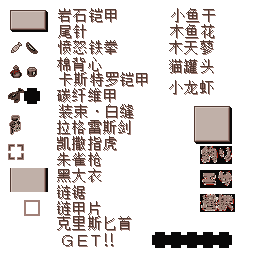
<style>
.page{position:relative;width:256px;height:256px;background:#ffffff}
.page>*{position:absolute;margin:0}
.t1{font:15px "SimSun";letter-spacing:0.02em;color:#503830}
</style>
<div class="page">
<p class="t1" style="left:58px;top:8px;width:58px;height:14px">岩石铠甲</p>
<p class="t1" style="left:171px;top:8px;width:44px;height:14px">小鱼干</p>
<p class="t1" style="left:58px;top:24px;width:28px;height:14px">尾针</p>
<p class="t1" style="left:170px;top:24px;width:44px;height:14px">木鱼花</p>
<p class="t1" style="left:58px;top:40px;width:59px;height:14px">愤怒铁拳</p>
<p class="t1" style="left:169px;top:40px;width:44px;height:14px">木天蓼</p>
<p class="t1" style="left:57px;top:57px;width:44px;height:14px">棉背心</p>
<p class="t1" style="left:169px;top:59px;width:44px;height:14px">猫罐头</p>
<p class="t1" style="left:59px;top:72px;width:88px;height:14px">卡斯特罗铠甲</p>
<p class="t1" style="left:57px;top:88px;width:58px;height:14px">碳纤维甲</p>
<p class="t1" style="left:169px;top:80px;width:44px;height:14px">小龙虾</p>
<p class="t1" style="left:59px;top:104px;width:74px;height:14px">装束·白缝</p>
<p class="t1" style="left:57px;top:120px;width:73px;height:14px">拉格雷斯剑</p>
<p class="t1" style="left:57px;top:136px;width:59px;height:14px">凯撒指虎</p>
<p class="t1" style="left:57px;top:152px;width:44px;height:14px">朱雀枪</p>
<p class="t1" style="left:57px;top:168px;width:44px;height:14px">黑大衣</p>
<p class="t1" style="left:57px;top:185px;width:28px;height:14px">链锯</p>
<p class="t1" style="left:57px;top:201px;width:43px;height:14px">链甲片</p>
<p class="t1" style="left:57px;top:216px;width:74px;height:14px">克里斯匕首</p>
</div>
